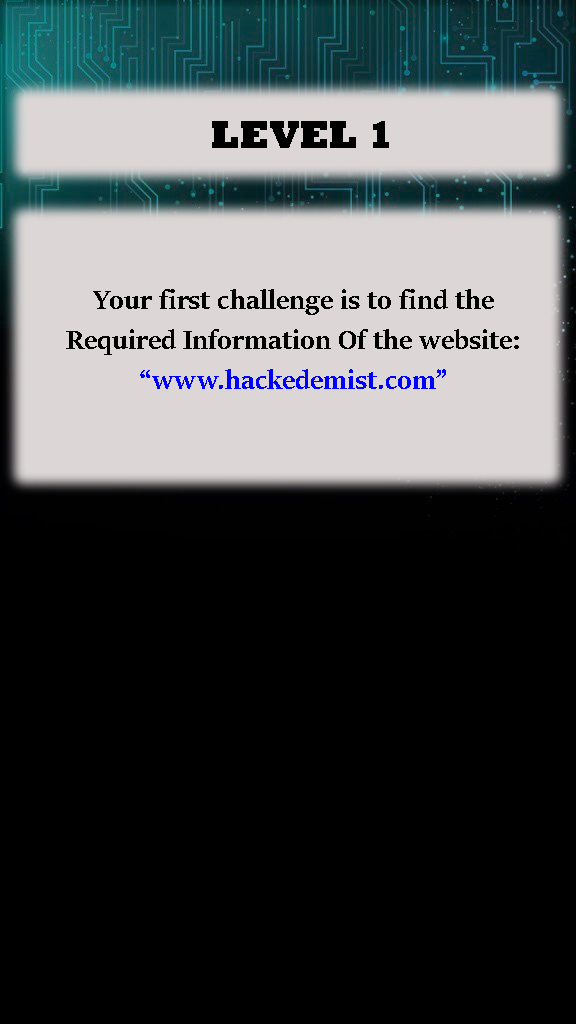
<style>
.page{position:relative;width:576px;height:1024px;background:#000000}
.page>*{position:absolute;margin:0}
.t1{font:40px "Rockwell-ExtraBold";color:#000000}
.t2{font:30px/10px "SitkaBanner-Bold";color:#000000}
.t3{font:30px/10px "SitkaBanner-Bold";color:#0000ff}
</style>
<div class="page">
<p class="t1" style="left:212px;top:121px;width:177px;height:27px">LEVEL 1</p>
<p class="t2" style="left:66px;top:289px;width:453px;height:100px;text-align:center">Your first challenge is to find the <br><br><br><br>Required Information Of the website:<br><br><br><br><span class="t3">“www.hackedemist.com”</span></p>
</div>
